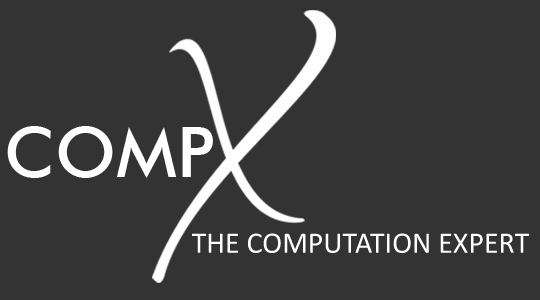
<style>
.page{position:relative;width:540px;height:300px;background:#333333}
.page>*{position:absolute;margin:0}
.t1{font:70.5px "FuturaBT-Medium";color:#ffffff}
.t2{font:30px "Calibri";color:#ffffff}
</style>
<div class="page">
<p class="t1" style="left:7px;top:126px;width:206px;height:52px">COMP</p>
<p class="t2" style="left:192px;top:233px;width:338px;height:20px">THE COMPUTATION EXPERT</p>
</div>
